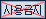
<style>
.page{position:relative;width:46px;height:19px;background:#d8dee3}
.page>*{position:absolute;margin:0}
.t1{font:11px "GulimChe";letter-spacing:-0.2em;color:#0e2747}
</style>
<div class="page">
<p class="t1" style="left:4px;top:5px;width:37px;height:10px">사용금지</p>
</div>
